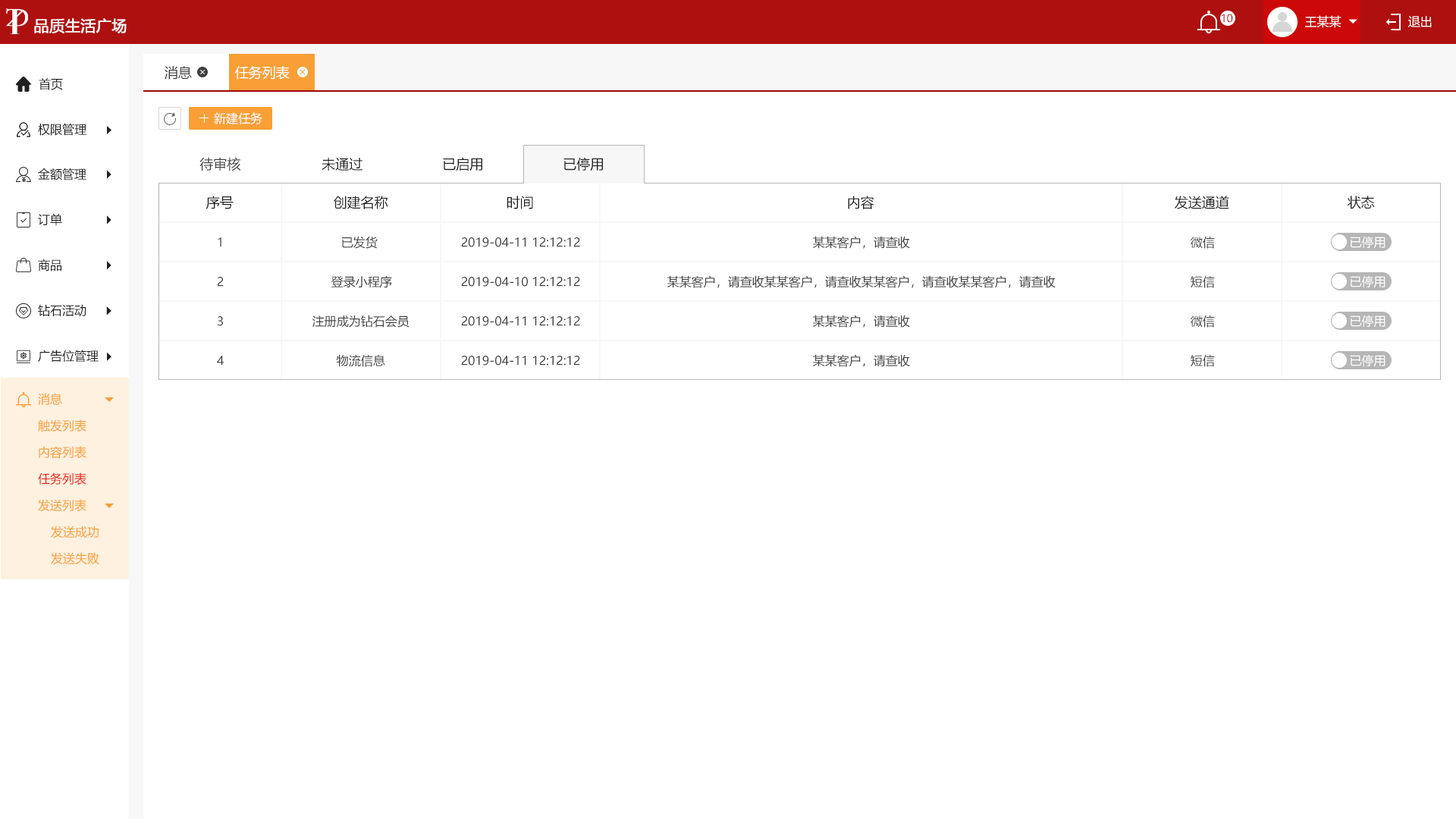
<style>
.page{position:relative;width:1456px;height:819px;background:#ffffff}
.page>*{position:absolute;margin:0}
.t1{font:10.6px "MicrosoftYaHei";color:#9c0606;text-transform:uppercase}
.t2{font:12.1px "MicrosoftYaHei";color:#ffffff;text-transform:uppercase}
.t3{font:15.2px "MicrosoftYaHei";color:#ffffff;text-transform:uppercase;font-weight:bold}
.t4{font:13.6px "MicrosoftYaHei";color:#404040;text-transform:uppercase}
.t5{font:13.6px "MicrosoftYaHei";color:#ffffff;text-transform:uppercase}
.t6{font:12.1px "MicrosoftYaHei";color:#202020;text-transform:uppercase}
.t7{font:13.6px "MicrosoftYaHei";color:#202020;text-transform:uppercase}
.t8{font:12.1px "MicrosoftYaHei";color:#404040;text-transform:uppercase}
.t9{font:12.1px "MicrosoftYaHei";color:#f99f36;text-transform:uppercase}
.t10{font:12.1px "MicrosoftYaHei";color:#e61f18;text-transform:uppercase}
</style>
<div class="page">
<p class="t1" style="left:1222px;top:14px;width:11px;height:9px">10</p>
<p class="t2" style="left:1305px;top:15px;width:36px;height:13px">王某某</p>
<p class="t2" style="left:1408px;top:16px;width:24px;height:11px">退出</p>
<p class="t3" style="left:34px;top:18px;width:93px;height:15px">品质生活广场</p>
<p class="t4" style="left:165px;top:66px;width:27px;height:14px">消息</p>
<p class="t5" style="left:234px;top:66px;width:56px;height:14px">任务列表</p>
<p class="t6" style="left:39px;top:78px;width:24px;height:12px">首页</p>
<p class="t2" style="left:214px;top:112px;width:48px;height:13px">新建任务</p>
<p class="t6" style="left:38px;top:123px;width:48px;height:13px">权限管理</p>
<p class="t4" style="left:199px;top:157px;width:42px;height:14px">待审核</p>
<p class="t7" style="left:322px;top:157px;width:40px;height:14px">未通过</p>
<p class="t7" style="left:443px;top:157px;width:39px;height:14px">已启用</p>
<p class="t7" style="left:563px;top:157px;width:40px;height:14px">已停用</p>
<p class="t6" style="left:38px;top:168px;width:48px;height:12px">金额管理</p>
<p class="t7" style="left:206px;top:196px;width:28px;height:13px">序号</p>
<p class="t7" style="left:334px;top:196px;width:54px;height:13px">创建名称</p>
<p class="t7" style="left:507px;top:196px;width:26px;height:13px">时间</p>
<p class="t7" style="left:848px;top:196px;width:26px;height:13px">内容</p>
<p class="t7" style="left:1175px;top:196px;width:54px;height:13px">发送通道</p>
<p class="t7" style="left:1347px;top:196px;width:28px;height:13px">状态</p>
<p class="t6" style="left:38px;top:213px;width:24px;height:13px">订单</p>
<p class="t8" style="left:218px;top:237px;width:3px;height:10px">1</p>
<p class="t8" style="left:342px;top:236px;width:36px;height:13px">已发货</p>
<p class="t8" style="left:461px;top:237px;width:119px;height:10px">2019-04-11 12:12:12</p>
<p class="t8" style="left:813px;top:236px;width:97px;height:13px">某某客户，请查收</p>
<p class="t8" style="left:1191px;top:236px;width:24px;height:13px">微信</p>
<p class="t2" style="left:1350px;top:236px;width:35px;height:13px">已停用</p>
<p class="t6" style="left:38px;top:259px;width:23px;height:12px">商品</p>
<p class="t8" style="left:217px;top:277px;width:7px;height:10px">2</p>
<p class="t8" style="left:331px;top:275px;width:61px;height:13px">登录小程序</p>
<p class="t8" style="left:461px;top:277px;width:119px;height:10px">2019-04-10 12:12:12</p>
<p class="t8" style="left:667px;top:275px;width:389px;height:13px">某某客户，请查收某某客户，请查收某某客户，请查收某某客户，请查收</p>
<p class="t8" style="left:1191px;top:275px;width:24px;height:13px">短信</p>
<p class="t2" style="left:1350px;top:275px;width:35px;height:13px">已停用</p>
<p class="t6" style="left:38px;top:304px;width:48px;height:12px">钻石活动</p>
<p class="t8" style="left:218px;top:316px;width:5px;height:10px">3</p>
<p class="t8" style="left:312px;top:315px;width:97px;height:13px">注册成为钻石会员</p>
<p class="t8" style="left:461px;top:316px;width:119px;height:10px">2019-04-11 12:12:12</p>
<p class="t8" style="left:813px;top:315px;width:97px;height:13px">某某客户，请查收</p>
<p class="t8" style="left:1191px;top:315px;width:24px;height:13px">微信</p>
<p class="t2" style="left:1350px;top:315px;width:35px;height:13px">已停用</p>
<p class="t6" style="left:38px;top:350px;width:61px;height:12px">广告位管理</p>
<p class="t8" style="left:217px;top:356px;width:7px;height:10px">4</p>
<p class="t8" style="left:336px;top:354px;width:49px;height:13px">物流信息</p>
<p class="t8" style="left:461px;top:356px;width:119px;height:10px">2019-04-11 12:12:12</p>
<p class="t8" style="left:813px;top:354px;width:97px;height:13px">某某客户，请查收</p>
<p class="t8" style="left:1191px;top:354px;width:24px;height:13px">短信</p>
<p class="t2" style="left:1350px;top:354px;width:35px;height:13px">已停用</p>
<p class="t9" style="left:38px;top:393px;width:24px;height:12px">消息</p>
<p class="t9" style="left:38px;top:419px;width:48px;height:12px">触发列表</p>
<p class="t9" style="left:39px;top:446px;width:47px;height:13px">内容列表</p>
<p class="t10" style="left:38px;top:472px;width:48px;height:13px">任务列表</p>
<p class="t9" style="left:38px;top:499px;width:48px;height:12px">发送列表</p>
<p class="t9" style="left:51px;top:526px;width:48px;height:12px">发送成功</p>
<p class="t9" style="left:51px;top:552px;width:48px;height:13px">发送失败</p>
</div>
